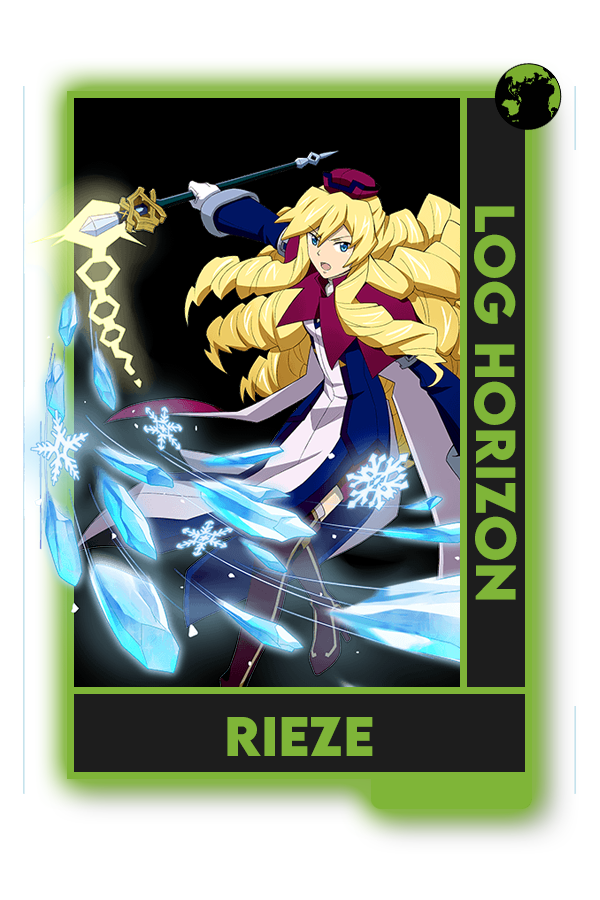
<style>
.page{position:relative;width:600px;height:900px}
.page>*{position:absolute;margin:0}
.t1{font:50px "LEMONMILK-Bold";color:#7fad41}
</style>
<div class="page">
<p class="t1" style="left:474px;top:206px;width:43px;height:394px;rotate:90deg">Log Horizon</p>
<p class="t1" style="left:227px;top:717px;width:146px;height:39px">Rieze</p>
</div>
